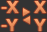
<style>
.page{position:relative;width:47px;height:32px;background:#333333}
.page>*{position:absolute;margin:0}
.t1{font:18px "Ubuntu-Bold";color:#ef945f}
.t2{font:18px "Ubuntu-Bold";color:#ee935f}
</style>
<div class="page">
<p class="t1" style="left:1px;top:1px;width:18px;height:12px">-X</p>
<p class="t1" style="left:34px;top:1px;width:12px;height:12px">X</p>
<p class="t2" style="left:1px;top:19px;width:17px;height:12px">-Y</p>
<p class="t1" style="left:34px;top:19px;width:12px;height:12px">Y</p>
</div>
